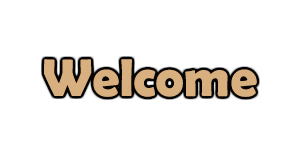
<style>
.page{position:relative;width:300px;height:150px;background:#ffffff}
.page>*{position:absolute;margin:0}
.t1{font:53.3px "BerlinSansFBDemi-Bold";color:#d8b080}
</style>
<div class="page">
<p class="t1" style="left:44px;top:59px;width:213px;height:38px">Welcome</p>
</div>
